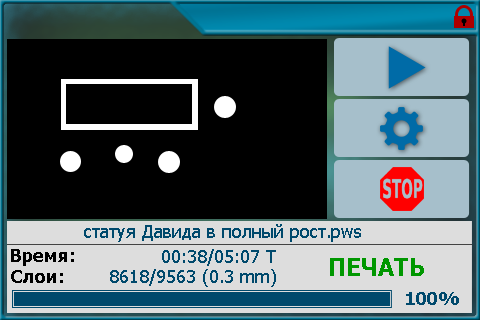
<style>
.page{position:relative;width:480px;height:320px;background:#000000}
.page>*{position:absolute;margin:0}
.t1{font:18px "Tahoma";color:#00496c}
.t2{font:18px "Tahoma-Bold";color:#000000}
.t3{font:24px "Tahoma-Bold";color:#009700}
.t4{font:18px "Tahoma-Bold";color:#00496c}
</style>
<div class="page">
<p class="t1" style="left:84px;top:224px;width:277px;height:18px">статуя Давида в полный рост.pws</p>
<p class="t2" style="left:11px;top:249px;width:63px;height:17px">Время:</p>
<p class="t1" style="left:162px;top:249px;width:114px;height:17px">00:38/05:07 T</p>
<p class="t2" style="left:11px;top:270px;width:52px;height:13px">Слои:</p>
<p class="t1" style="left:110px;top:269px;width:166px;height:18px">8618/9563 (0.3 mm)</p>
<p class="t3" style="left:330px;top:258px;width:94px;height:18px">ПЕЧАТЬ</p>
<p class="t4" style="left:406px;top:292px;width:53px;height:13px">100%</p>
</div>
